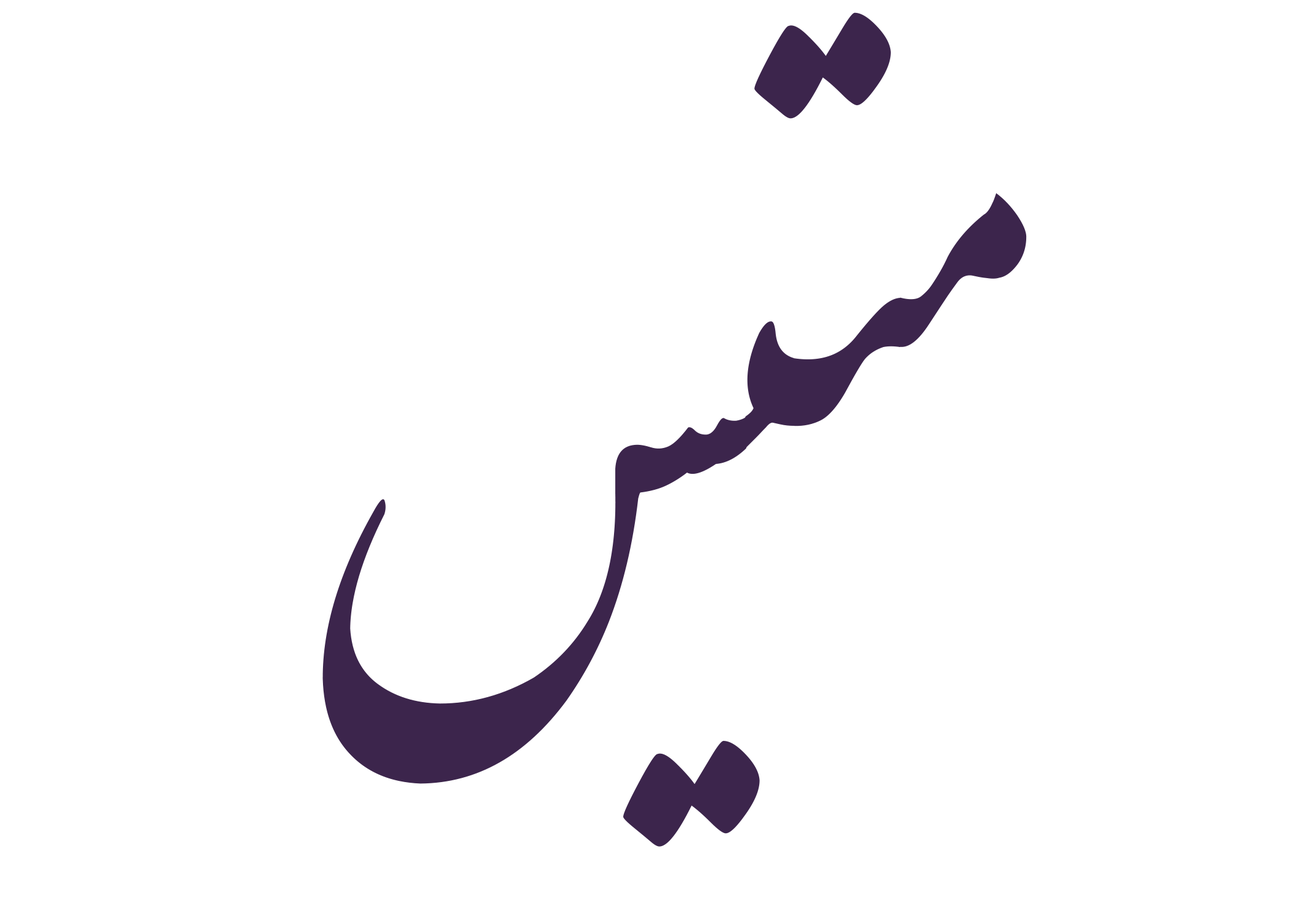
<style>
.page{position:relative;width:1292px;height:923px;background:#ffffff}
.page>*{position:absolute;margin:0}
.t1{font:769.1px "IranNastaliq";color:#3c254c}
</style>
<div class="page">
<p class="t1" style="left:322px;top:12px;width:705px;height:835px">متیس</p>
</div>
